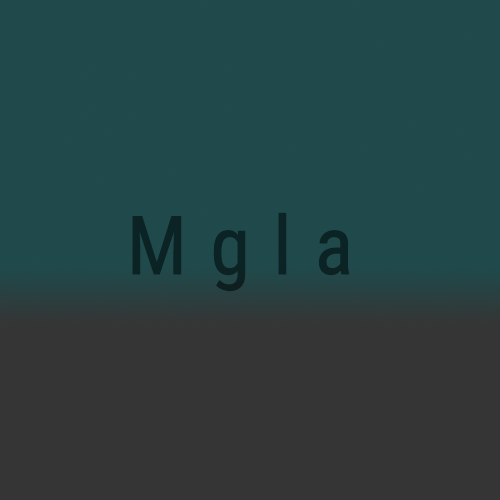
<style>
.page{position:relative;width:500px;height:500px;background:#353535}
.page>*{position:absolute;margin:0}
.t1{font:81px "RobotoCondensed-Regular";letter-spacing:0.265em;color:#222222;font-weight:bold}
</style>
<div class="page">
<p class="t1" style="left:132px;top:212px;width:218px;height:80px">Mgla</p>
</div>
